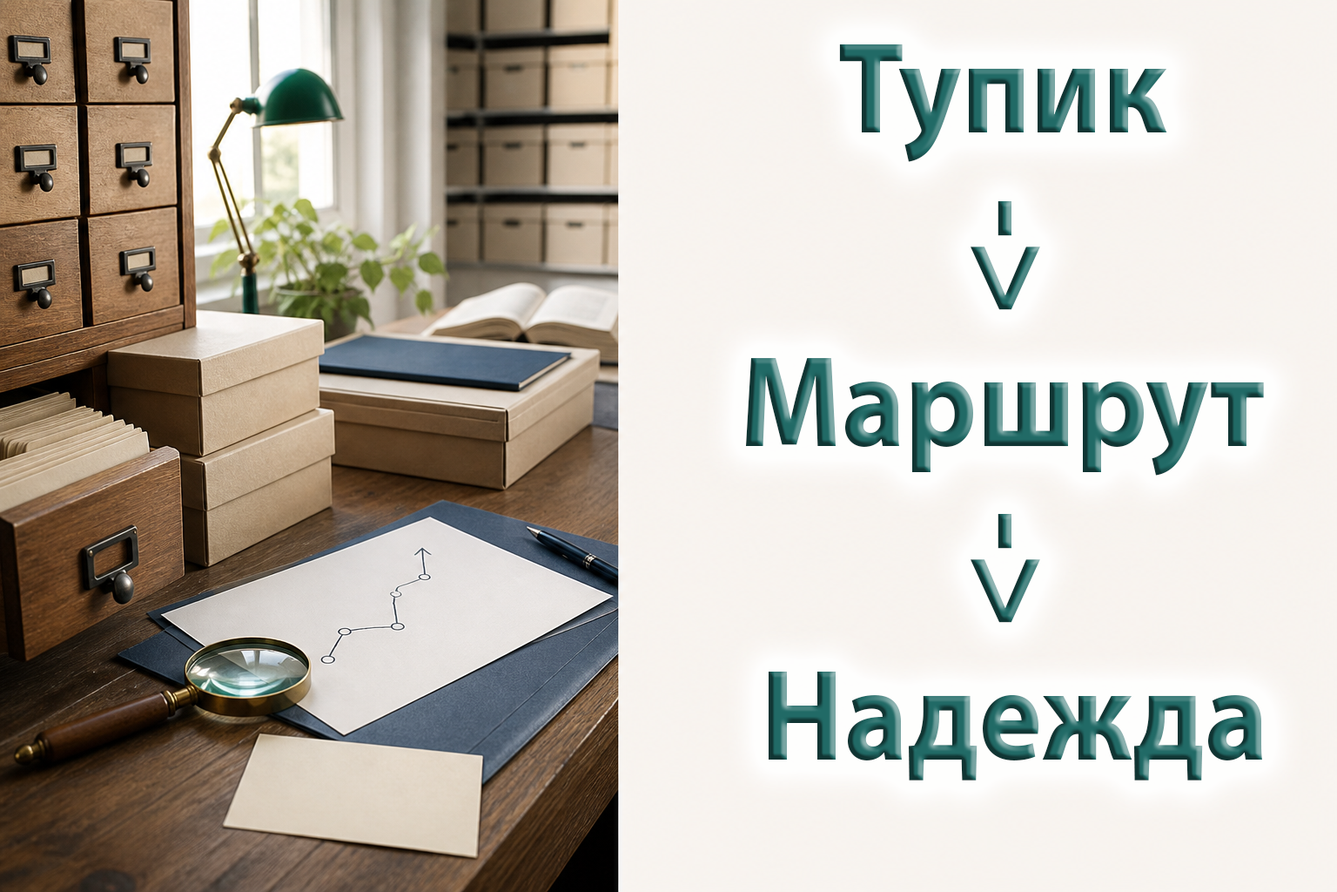
<style>
.page{position:relative;width:1337px;height:892px}
.page>*{position:absolute;margin:0}
.t1{font:130.6px "MyriadPro-Bold";scale:0.92 1}
.t2{font:130.6px "MyriadPro-Bold"}
</style>
<div class="page">
<p class="t1" style="left:746px;top:44px;width:518px;height:736px;text-align:center">Тупик <br><br>Маршрут <br><br>Надежда</p>
<p class="t2" style="left:971px;top:201px;width:69px;height:109px;rotate:90deg">-&gt;</p>
<p class="t2" style="left:971px;top:514px;width:69px;height:109px;rotate:90deg">-&gt;</p>
</div>
